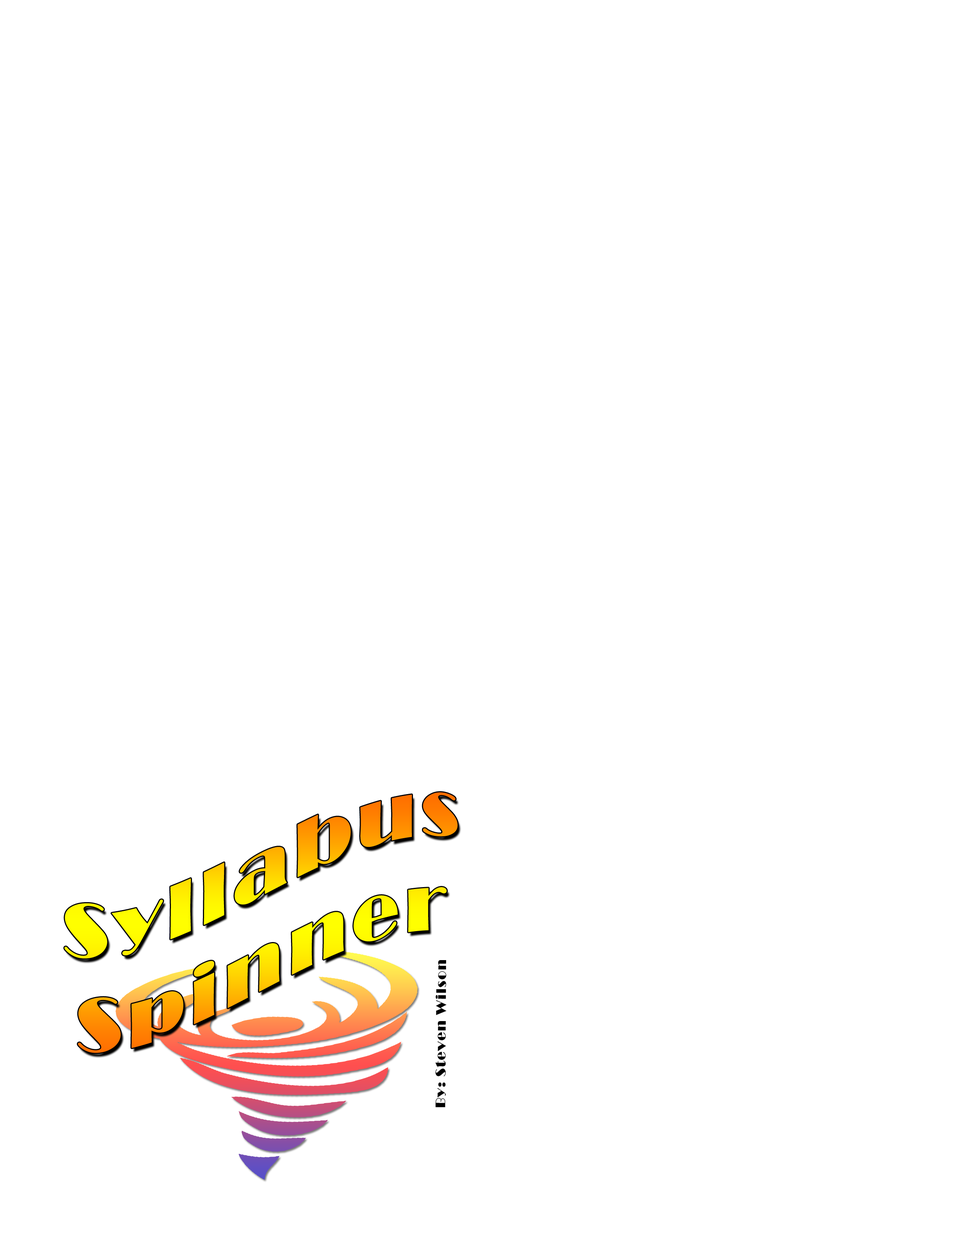
<style>
.page{position:relative;width:960px;height:1242px;background:#ffffff}
.page>*{position:absolute;margin:0}
.t1{font:79px "Broadway";letter-spacing:0.06em}
.t2{font:14.4px "Broadway";letter-spacing:0.06em;color:#000000}
</style>
<div class="page">
<p class="t1" style="left:64px;top:792px;width:394px;height:261px;text-align:center">Syllabus<br>Spinner</p>
<p class="t2" style="left:435px;top:960px;width:11px;height:147px;rotate:-90deg">By: Steven Wilson</p>
</div>
